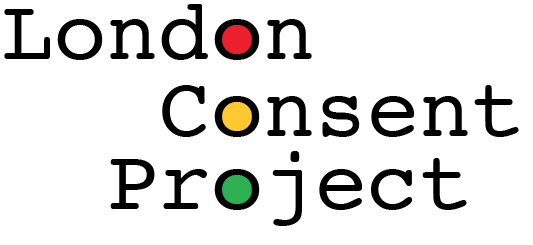
<style>
.page{position:relative;width:533px;height:245px;background:#ffffff}
.page>*{position:absolute;margin:0}
.t1{font:86.7px "Courier";color:#000000}
</style>
<div class="page">
<p class="t1" style="left:4px;top:4px;width:308px;height:56px">London</p>
<p class="t1" style="left:162px;top:85px;width:357px;height:52px">Consent</p>
<p class="t1" style="left:110px;top:151px;width:357px;height:75px">Project</p>
</div>
